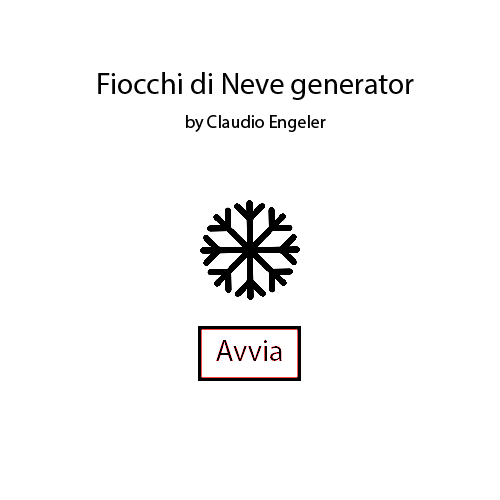
<style>
.page{position:relative;width:500px;height:500px;background:#ffffff}
.page>*{position:absolute;margin:0}
.t1{font:30px "MyriadPro-Regular";color:#000000}
.t2{font:18px "MyriadPro-Regular";color:#000000}
</style>
<div class="page">
<p class="t1" style="left:98px;top:72px;width:316px;height:28px">Fiocchi di Neve generator</p>
<p class="t2" style="left:186px;top:115px;width:140px;height:17px">by Claudio Engeler</p>
<p class="t1" style="left:216px;top:340px;width:66px;height:21px">Avvia</p>
</div>
